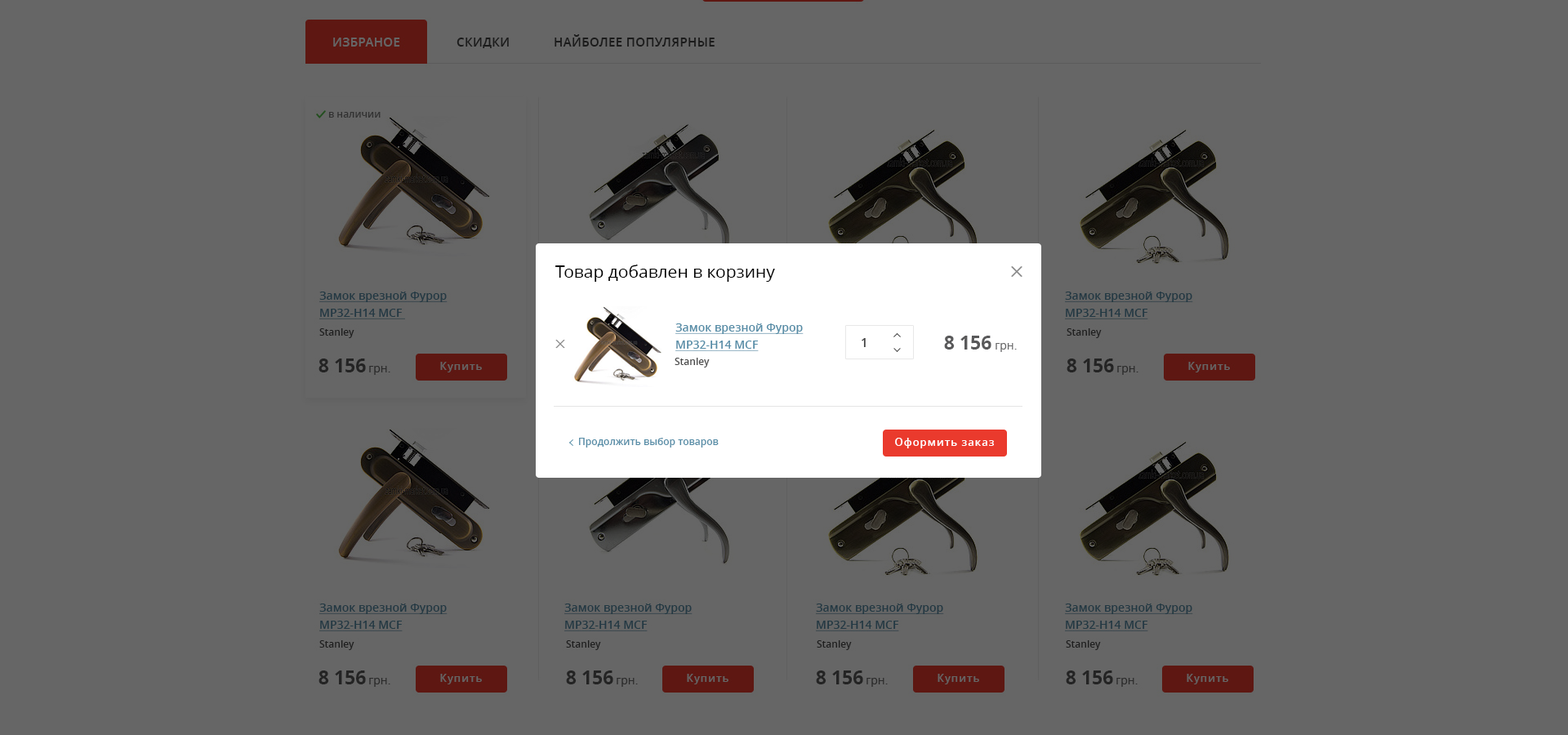
<style>
.page{position:relative;width:1568px;height:735px;background:#666666}
.page>*{position:absolute;margin:0}
.t1{font:17.1px "OpenSans";color:#000000}
.t2{font:11.4px/17.1px "OpenSans-Semibold";color:#568da7;text-decoration:underline}
.t3{font:12.2px "OpenSans-Semibold";color:#444444}
.t4{font:18.8px "OpenSans-Bold";color:#59595a}
.t5{font:11.4px "OpenSans";color:#686869}
.t6{font:9.8px "OpenSans-Semibold";color:#4c4c4c}
.t7{font:9.8px "OpenSans-Semibold";color:#568da7}
.t8{font:10.6px "OpenSans-Semibold";letter-spacing:0.075em;color:#ffffff}
</style>
<div class="page">
<p class="t1" style="left:555px;top:265px;width:220px;height:17px">Товар добавлен в корзину</p>
<p class="t2" style="left:675px;top:323px;width:129px;height:28px">Замок врезной Фурор<br>MP32-H14 MCF</p>
<p class="t3" style="left:862px;top:338px;width:4px;height:9px">1</p>
<p class="t4" style="left:944px;top:336px;width:47px;height:14px">8 156</p>
<p class="t5" style="left:996px;top:343px;width:21px;height:9px">грн.</p>
<p class="t6" style="left:675px;top:358px;width:35px;height:10px">Stanley</p>
<p class="t7" style="left:579px;top:438px;width:140px;height:10px">Продолжить выбор товаров</p>
<p class="t8" style="left:895px;top:438px;width:99px;height:10px">Оформить заказ</p>
</div>
